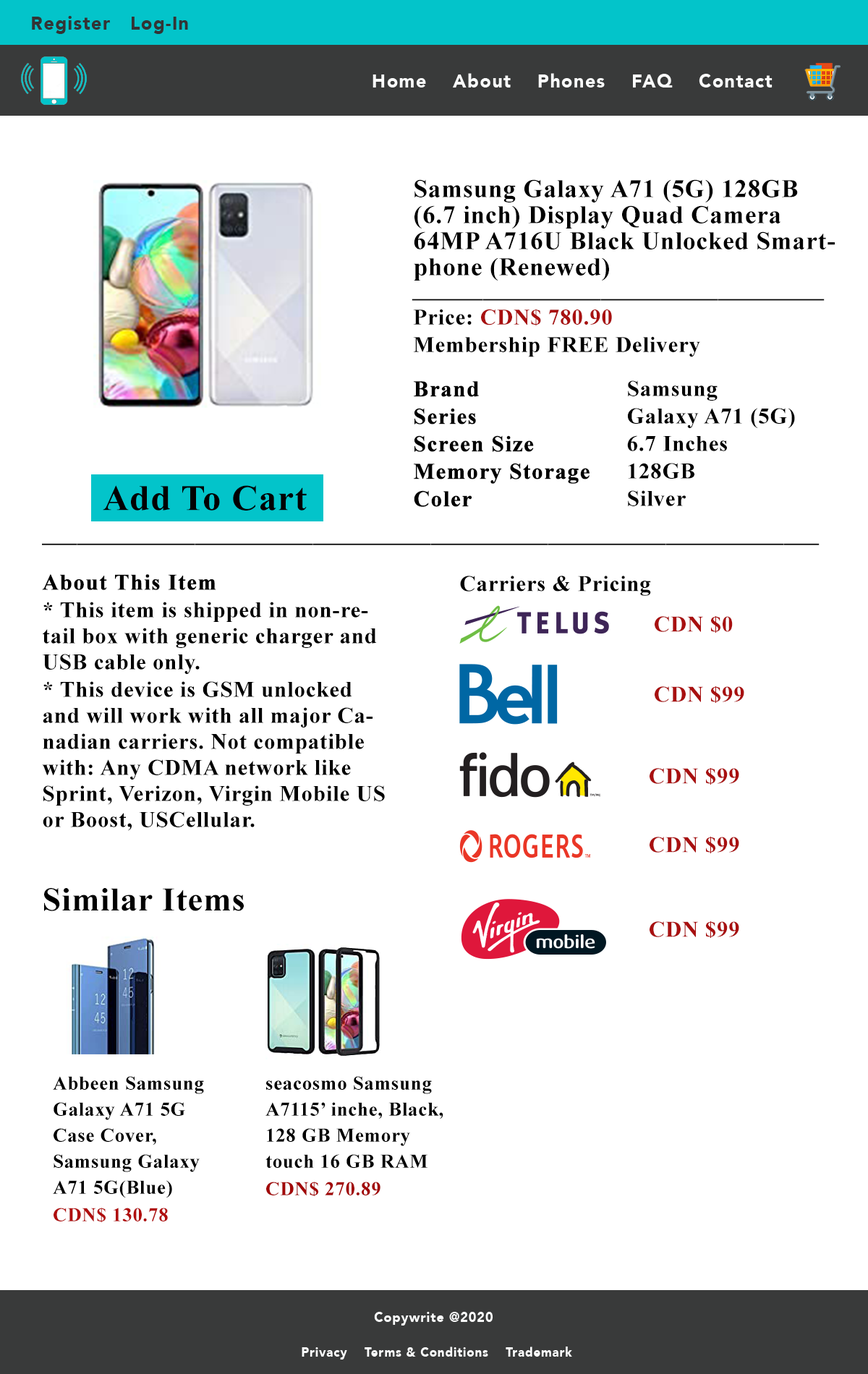
<style>
.page{position:relative;width:868px;height:1374px;background:#ffffff}
.page>*{position:absolute;margin:0}
.t1{font:19.1px "Avenir-Black";letter-spacing:0.05em;color:#333435;scale:0.96 1}
.t2{font:19.1px "Avenir-Black";letter-spacing:0.05em;color:#fbfcfc;scale:0.96 1}
.t3{font:25.1px/26px "TimesNewRomanPS-BoldMT";letter-spacing:0.025em;color:#000000}
.t4{font:22.2px "TimesNewRomanPS-BoldMT";letter-spacing:0.025em;color:#000000}
.t5{font:22.2px/26px "TimesNewRomanPS-BoldMT";letter-spacing:0.025em;color:#000000}
.t6{font:22.2px/26px "TimesNewRomanPS-BoldMT";letter-spacing:0.025em;color:#a81010}
.t7{font:22.2px/26px "TimesNewRomanPS-BoldMT";letter-spacing:0.025em;color:#000000;font-weight:bold}
.t8{font:35.8px "TimesNewRomanPS-BoldMT";letter-spacing:0.025em;color:#030002}
.t9{font:22.2px "TimesNewRomanPS-BoldMT";letter-spacing:0.025em;color:#a81010}
.t10{font:32.9px "TimesNewRomanPS-BoldMT";letter-spacing:0.025em;color:#000000}
.t11{font:19.3px/26px "TimesNewRomanPS-BoldMT";letter-spacing:0.025em;color:#000000}
.t12{font:19.3px/26px "TimesNewRomanPS-BoldMT";letter-spacing:0.025em;color:#b00e0e}
.t13{font:19.3px/26px "TimesNewRomanPS-BoldMT";letter-spacing:0.025em;color:#a20606}
.t14{font:13.5px "Avenir-Black";letter-spacing:0.05em;color:#fcfdfd;scale:0.96 1}
.t15{font:12.7px "Avenir-Black";letter-spacing:0.05em;color:#fcfdfd;scale:0.96 1}
</style>
<div class="page">
<p class="t1" style="left:32px;top:16px;width:156px;height:18px">Register   Log-In</p>
<p class="t2" style="left:372px;top:73px;width:400px;height:15px">Home    About    Phones    FAQ    Contact</p>
<p class="t3" style="left:414px;top:179px;width:421px;height:102px">Samsung Galaxy A71 (5G) 128GB (6.7 inch) Display Quad Camera 64MP A716U Black Unlocked Smartphone (Renewed)</p>
<p class="t4" style="left:411px;top:299px;width:413px;height:2px">___________________________________</p>
<p class="t5" style="left:413px;top:309px;width:287px;height:48px">Price: <span class="t6">CDN$ 780.90</span> <br>Membership FREE Delivery</p>
<p class="t7" style="left:414px;top:381px;width:175px;height:126px">Brand<br>Series<br>Screen Size<br>Memory Storage<br>Coler</p>
<p class="t5" style="left:627px;top:380px;width:168px;height:126px">Samsung<br>Galaxy A71 (5G)<br>6.7 Inches<br>128GB<br>Silver</p>
<p class="t8" style="left:103px;top:485px;width:204px;height:26px">Add To Cart</p>
<p class="t4" style="left:42px;top:543px;width:777px;height:2px">__________________________________________________________________</p>
<p class="t5" style="left:42px;top:574px;width:343px;height:257px"><span class="t7">About This Item<br></span>* This item is shipped in non-retail box with generic charger and USB cable only.<br>* This device is GSM unlocked and will work with all major Canadian carriers. Not compatible with: Any CDMA network like Sprint, Verizon, Virgin Mobile US or Boost, USCellular.</p>
<p class="t4" style="left:460px;top:576px;width:191px;height:20px">Carriers &amp; Pricing</p>
<p class="t9" style="left:654px;top:616px;width:79px;height:17px">CDN $0</p>
<p class="t9" style="left:654px;top:686px;width:90px;height:17px">CDN $99</p>
<p class="t9" style="left:649px;top:768px;width:90px;height:17px">CDN $99</p>
<p class="t9" style="left:649px;top:837px;width:90px;height:16px">CDN $99</p>
<p class="t10" style="left:44px;top:888px;width:200px;height:23px">Similar Items</p>
<p class="t9" style="left:649px;top:921px;width:90px;height:17px">CDN $99</p>
<p class="t11" style="left:53px;top:1076px;width:151px;height:147px">Abbeen Samsung Galaxy A71 5G Case Cover,  Samsung Galaxy A71 5G(Blue)<br><span class="t12">CDN$ 130.78</span></p>
<p class="t11" style="left:265px;top:1076px;width:178px;height:121px">seacosmo Samsung A7115’ inche, Black, 128 GB Memory touch 16 GB RAM <br><span class="t13">CDN$ 270.89</span></p>
<p class="t14" style="left:374px;top:1312px;width:119px;height:14px">Copywrite @2020</p>
<p class="t15" style="left:302px;top:1347px;width:270px;height:13px">Privacy    Terms &amp; Conditions    Trademark</p>
</div>
